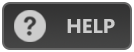
<style>
.page{position:relative;width:134px;height:52px}
.page>*{position:absolute;margin:0}
.t1{font:20px "SegoeUI-Bold";color:#cccccc}
</style>
<div class="page">
<p class="t1" style="left:67px;top:19px;width:48px;height:14px">HELP</p>
</div>
